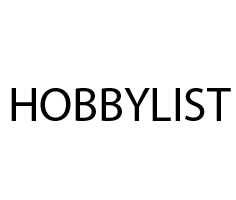
<style>
.page{position:relative;width:236px;height:200px;background:#ffffff}
.page>*{position:absolute;margin:0}
.t1{font:48px "MyriadPro-Regular";color:#000000}
</style>
<div class="page">
<p class="t1" style="left:11px;top:88px;width:220px;height:33px">HOBBYLIST</p>
</div>
